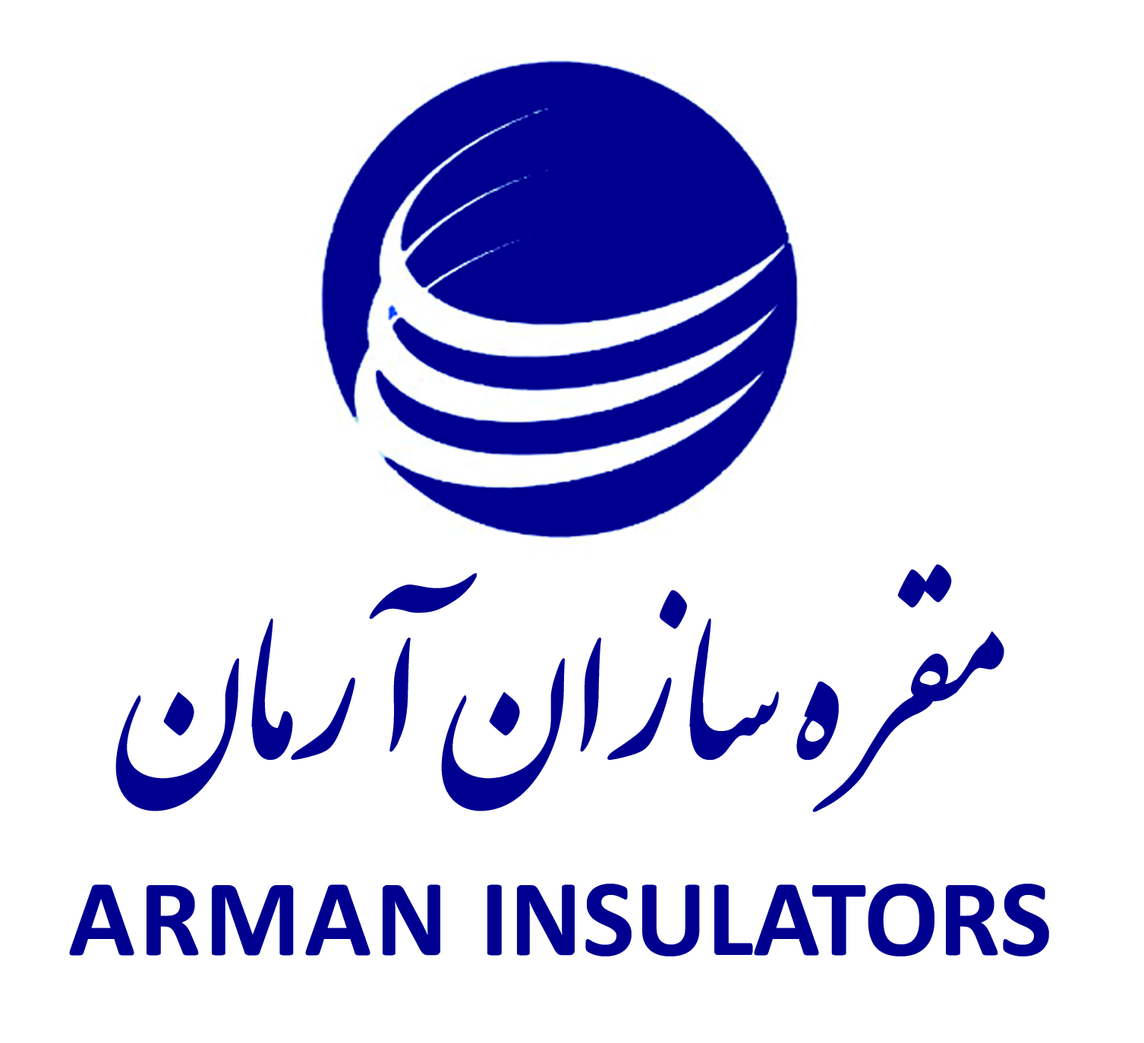
<style>
.page{position:relative;width:1144px;height:1043px;background:#ffffff}
.page>*{position:absolute;margin:0}
.t1{font:208.2px "IranNastaliq";color:#000091;scale:0.96 1}
.t2{font:110.7px "Calibri-Bold";color:#000091}
.t3{font:110.7px "Calibri-Bold";letter-spacing:0.03em;color:#000091}
</style>
<div class="page">
<p class="t1" style="left:115px;top:564px;width:889px;height:248px">مقره سازان آرمان</p>
<p class="t2" style="left:69px;top:883px;width:980px;height:73px"><span class="t3">ARMAN </span>INSULATORS</p>
</div>
